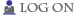
<style>
.page{position:relative;width:75px;height:15px;background:#ffffff}
.page>*{position:absolute;margin:0}
.t1{font:12px "CharlemagneStd-Bold";color:#666666}
</style>
<div class="page">
<p class="t1" style="left:20px;top:2px;width:54px;height:12px">Log on</p>
</div>
